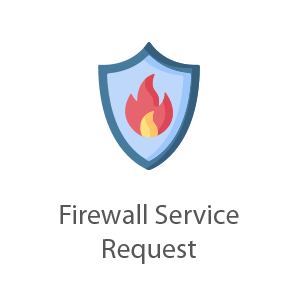
<style>
.page{position:relative;width:300px;height:300px;background:#ffffff}
.page>*{position:absolute;margin:0}
.t1{font:28.2px "MyriadPro-Regular";color:#575656}
</style>
<div class="page">
<p class="t1" style="left:60px;top:204px;width:179px;height:60px;text-align:center">Firewall Service<br>Request</p>
</div>
